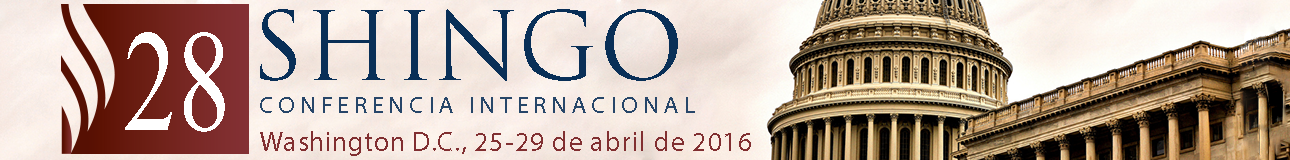
<style>
.page{position:relative;width:1290px;height:160px}
.page>*{position:absolute;margin:0}
.t1{font:92.8px "TrajanPro-Regular";color:#092f57}
.t2{font:145.5px "MongolianBaiti";color:#ffffff;scale:0.74 1}
.t3{font:23.7px "MyriadPro-Regular";letter-spacing:0.214em;color:#274669}
.t4{font:27.6px "MyriadPro-Regular";letter-spacing:0.035em;color:#812f31}
</style>
<div class="page">
<p class="t1" style="left:260px;top:9px;width:418px;height:72px">SHINGO</p>
<p class="t2" style="left:125px;top:32px;width:100px;height:100px">28</p>
<p class="t3" style="left:260px;top:97px;width:435px;height:16px">CONFERENCIA INTERNACIONAL</p>
<p class="t4" style="left:260px;top:131px;width:491px;height:25px">Washington D.C., 25-29 de abril de 2016</p>
</div>
